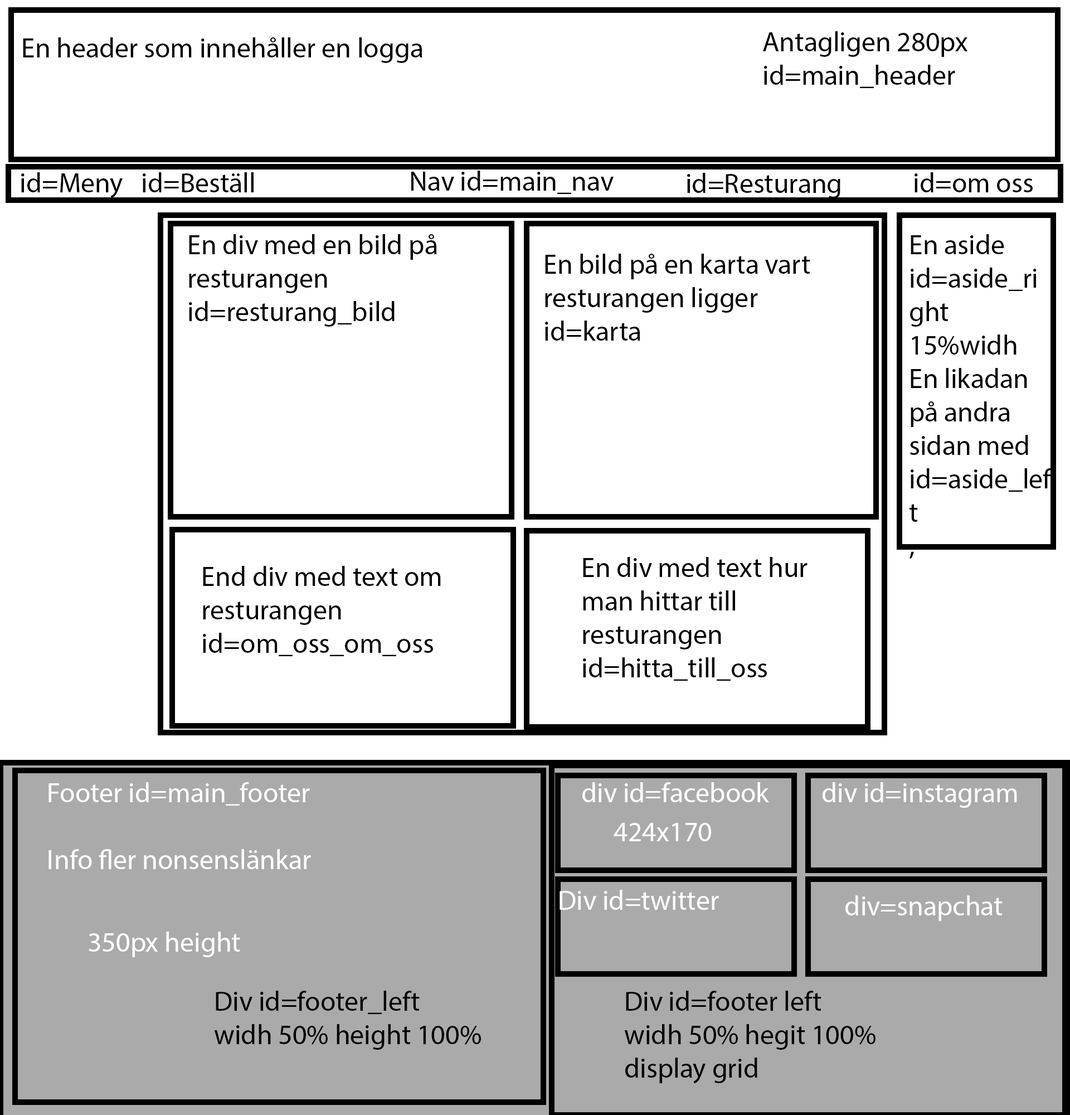
<style>
.page{position:relative;width:1070px;height:1115px;background:#ffffff}
.page>*{position:absolute;margin:0}
.t1{font:27.9px "MyriadPro-Regular";color:#000000}
.t2{font:27.9px "MyriadPro-Regular";color:#fffefe}
.t3{font:27.9px "MyriadPro-Regular";color:#ffffff}
</style>
<div class="page">
<p class="t1" style="left:23px;top:37px;width:399px;height:26px">En header som innehåller en logga</p>
<p class="t1" style="left:763px;top:31px;width:205px;height:57px">Antagligen 280px<br>id=main_header</p>
<p class="t1" style="left:21px;top:172px;width:102px;height:26px">id=Meny</p>
<p class="t1" style="left:143px;top:172px;width:111px;height:20px">id=Beställ</p>
<p class="t1" style="left:411px;top:171px;width:203px;height:23px">Nav id=main_nav</p>
<p class="t1" style="left:687px;top:173px;width:153px;height:25px">id=Resturanger</p>
<p class="t1" style="left:914px;top:172px;width:119px;height:20px">id=om oss</p>
<p class="t1" style="left:189px;top:234px;width:248px;height:93px">En div med en bild på resturangen <br>id=resturang_bild</p>
<p class="t1" style="left:909px;top:234px;width:143px;height:324px">En aside <br>id=aside_right<br>15%widh<br>En likadan på andra sidan med id=aside_left<br>,</p>
<p class="t1" style="left:545px;top:254px;width:265px;height:86px">En bild på en karta vart resturangen ligger<br>id=karta</p>
<p class="t1" style="left:583px;top:557px;width:224px;height:123px">En div med text hur man hittar till resturangen id=hitta_till_oss</p>
<p class="t1" style="left:203px;top:566px;width:238px;height:90px">End div med text om resturangen id=om_oss_om_oss</p>
<p class="t2" style="left:48px;top:782px;width:263px;height:87px">Footer id=main_footer<br><br>Info fler nonsenslänkar</p>
<p class="t2" style="left:582px;top:782px;width:187px;height:20px">div id=facebook</p>
<p class="t2" style="left:823px;top:782px;width:194px;height:25px">div id=instagram</p>
<p class="t2" style="left:614px;top:823px;width:97px;height:18px">424x170</p>
<p class="t2" style="left:559px;top:889px;width:160px;height:20px">Div id=twitter</p>
<p class="t2" style="left:845px;top:895px;width:157px;height:26px">div=snapchat</p>
<p class="t3" style="left:89px;top:931px;width:151px;height:26px">350px height</p>
<p class="t1" style="left:214px;top:990px;width:267px;height:59px">Div id=footer_left <br>widh 50% height 100%</p>
<p class="t1" style="left:624px;top:990px;width:251px;height:93px">Div id=footer left<br>widh 50% hegit 100%<br>display grid</p>
</div>
